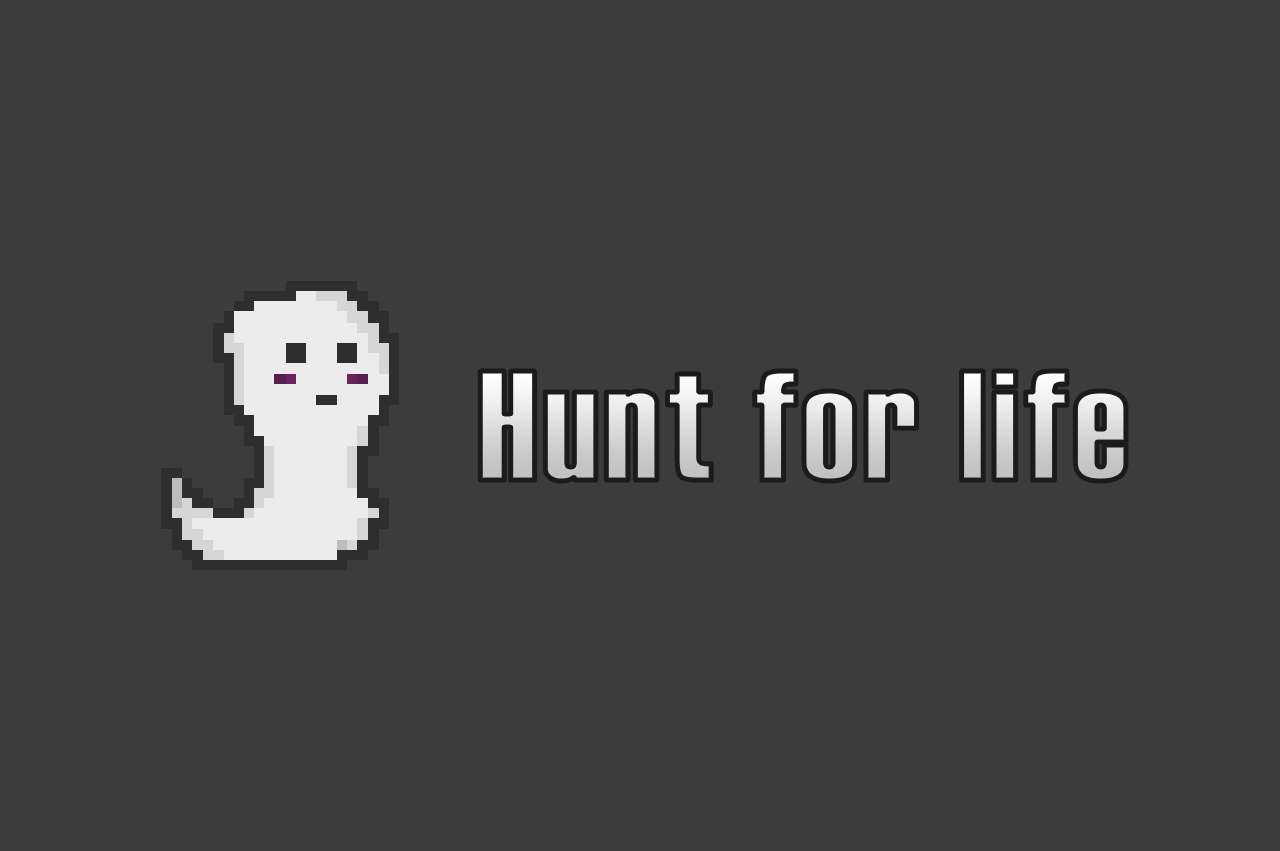
<style>
.page{position:relative;width:1280px;height:851px;background:#3c3c3c}
.page>*{position:absolute;margin:0}
.t1{font:155.3px "Haettenschweiler";letter-spacing:0.04em}
</style>
<div class="page">
<p class="t1" style="left:480px;top:371px;width:646px;height:110px">Hunt for life</p>
</div>
